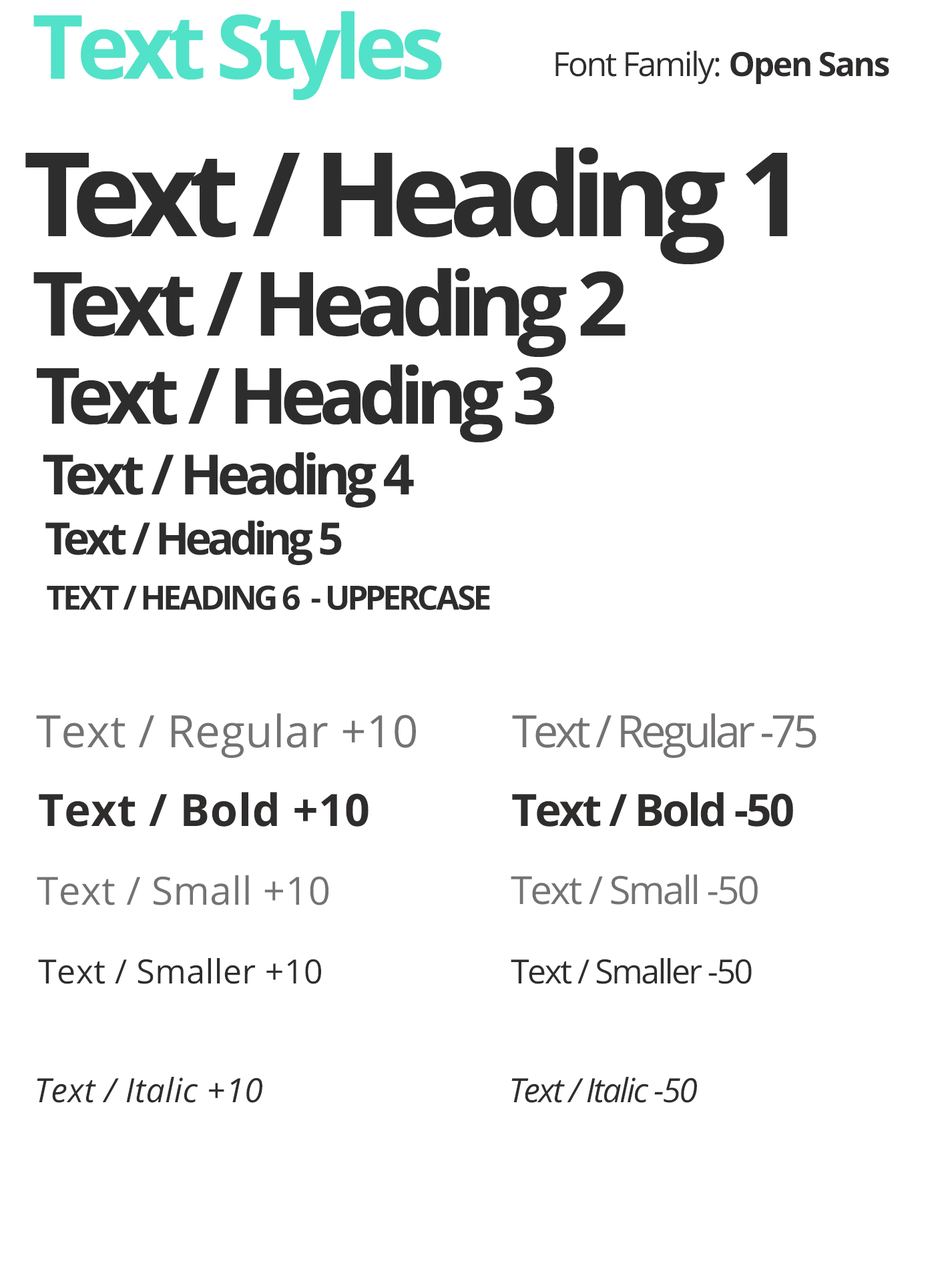
<style>
.page{position:relative;width:946px;height:1261px;background:#ffffff}
.page>*{position:absolute;margin:0}
.t1{font:89px "OpenSans-Bold";letter-spacing:-0.075em;color:#52e2c9}
.t2{font:33.4px "OpenSans";letter-spacing:-0.05em;color:#2f2c2c}
.t3{font:33.4px "OpenSans-Bold";letter-spacing:-0.05em;color:#2f2c2c}
.t4{font:116.8px "OpenSans-Bold";letter-spacing:-0.075em;color:#2f2c2c}
.t5{font:89px "OpenSans-Bold";letter-spacing:-0.075em;color:#2f2c2c}
.t6{font:77.8px "OpenSans-Bold";letter-spacing:-0.075em;color:#2f2c2c}
.t7{font:55.6px "OpenSans-Bold";letter-spacing:-0.075em;color:#2f2c2c}
.t8{font:44.5px "OpenSans-Bold";letter-spacing:-0.075em;color:#2f2c2c}
.t9{font:33.4px "OpenSans-Bold";letter-spacing:-0.075em;color:#2f2c2c}
.t10{font:44.5px "OpenSans";letter-spacing:0.01em;color:#757272}
.t11{font:44.5px "OpenSans";letter-spacing:-0.075em;color:#757272}
.t12{font:44.5px "OpenSans-Bold";letter-spacing:0.01em;color:#2f2c2c}
.t13{font:44.5px "OpenSans-Bold";letter-spacing:-0.05em;color:#2f2c2c}
.t14{font:38.9px "OpenSans";letter-spacing:0.01em;color:#757272}
.t15{font:38.9px "OpenSans";letter-spacing:-0.05em;color:#757272}
.t16{font:33.4px "OpenSans";letter-spacing:0.01em;color:#2f2c2c}
.t17{font:33.4px "OpenSans-Italic";letter-spacing:0.01em;color:#2f2c2c}
.t18{font:33.4px "OpenSans-Italic";letter-spacing:-0.05em;color:#2f2c2c}
</style>
<div class="page">
<p class="t1" style="left:33px;top:11px;width:409px;height:89px">Text Styles</p>
<p class="t2" style="left:555px;top:51px;width:164px;height:33px">Font Family:</p>
<p class="t3" style="left:730px;top:51px;width:159px;height:33px">Open Sans</p>
<p class="t4" style="left:25px;top:147px;width:762px;height:117px">Text / Heading 1</p>
<p class="t5" style="left:33px;top:268px;width:592px;height:89px">Text / Heading 2</p>
<p class="t6" style="left:37px;top:364px;width:517px;height:78px">Text / Heading 3</p>
<p class="t7" style="left:43px;top:452px;width:371px;height:56px">Text / Heading 4</p>
<p class="t8" style="left:45px;top:520px;width:297px;height:45px">Text / Heading 5</p>
<p class="t9" style="left:47px;top:585px;width:443px;height:26px">TEXT / HEADING 6  - UPPERCASE</p>
<p class="t10" style="left:36px;top:713px;width:380px;height:45px">Text / Regular +10</p>
<p class="t11" style="left:512px;top:713px;width:304px;height:45px">Text / Regular -75</p>
<p class="t12" style="left:39px;top:792px;width:329px;height:35px">Text / Bold +10</p>
<p class="t13" style="left:512px;top:792px;width:281px;height:35px">Text / Bold -50</p>
<p class="t14" style="left:37px;top:875px;width:291px;height:30px">Text / Small +10</p>
<p class="t15" style="left:510px;top:874px;width:247px;height:31px">Text / Small -50</p>
<p class="t16" style="left:38px;top:958px;width:283px;height:26px">Text / Smaller +10</p>
<p class="t2" style="left:510px;top:958px;width:241px;height:26px">Text / Smaller -50</p>
<p class="t17" style="left:37px;top:1077px;width:225px;height:26px">Text / Italic +10</p>
<p class="t18" style="left:511px;top:1077px;width:186px;height:26px">Text / Italic -50</p>
</div>
